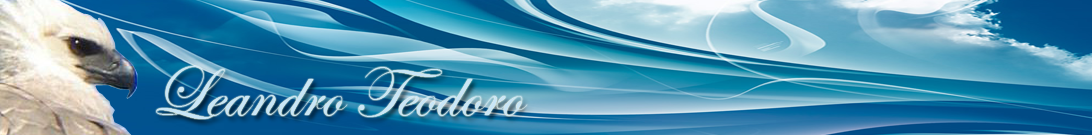
<style>
.page{position:relative;width:1092px;height:135px}
.page>*{position:absolute;margin:0}
.t1{font:72px "EdwardianScriptITC";color:#c9e6f7}
</style>
<div class="page">
<p class="t1" style="left:156px;top:66px;width:372px;height:53px">Leandro Teodoro</p>
</div>
